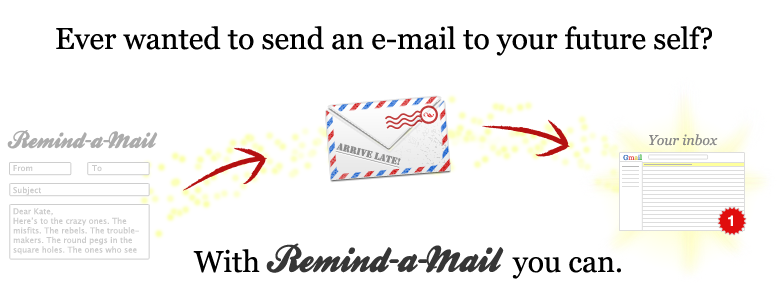
<style>
.page{position:relative;width:780px;height:300px;background:#ffffff}
.page>*{position:absolute;margin:0}
.t1{font:30px "Georgia";color:#000000}
.t2{font:24px "BallparkWeiner";color:#acabab}
.t3{font:14px "Georgia-Italic";color:#888787}
.t4{font:10px "Stencil";color:#8d8d8d;text-decoration:underline}
.t5{font:7px "Georgia";color:#306ab8}
.t6{font:7px "Georgia";color:#e34949}
.t7{font:7px "Georgia";color:#dcc64c}
.t8{font:7px "Georgia";color:#497cc1}
.t9{font:7px "Georgia";color:#2cab2f}
.t10{font:8px "LucidaGrande";color:#cbcbcb}
.t11{font:15px "HelveticaNeue-Bold";color:#ffffff}
.t12{font:38px "BallparkWeiner";color:#363636}
</style>
<div class="page">
<p class="t1" style="left:56px;top:26px;width:656px;height:30px">Ever wanted to send an e-mail to your future self?</p>
<p class="t2" style="left:7px;top:130px;width:151px;height:19px">Remind-a-Mail</p>
<p class="t3" style="left:649px;top:134px;width:69px;height:12px">Your inbox</p>
<p class="t4" style="left:335px;top:143px;width:66px;height:25px;rotate:14deg">Arrive late!</p>
<p class="t5" style="left:623px;top:154px;width:19px;height:7px">G<span class="t6">m</span><span class="t7">a</span><span class="t8">i</span><span class="t9">l</span></p>
<p class="t10" style="left:13px;top:165px;width:20px;height:7px">From</p>
<p class="t10" style="left:92px;top:165px;width:10px;height:7px">To</p>
<p class="t10" style="left:13px;top:186px;width:28px;height:9px">Subject</p>
<p class="t10" style="left:13px;top:208px;width:126px;height:47px">Dear Kate,<br>Here’s to the crazy ones. The misfits. The rebels. The troublemakers. The round pegs in the square holes. The ones who see things</p>
<p class="t11" style="left:728px;top:215px;width:5px;height:11px">1</p>
<p class="t12" style="left:193px;top:243px;width:428px;height:36px"><span class="t1">With </span>Remind-a-Mail<span class="t1">  you can.</span></p>
</div>
